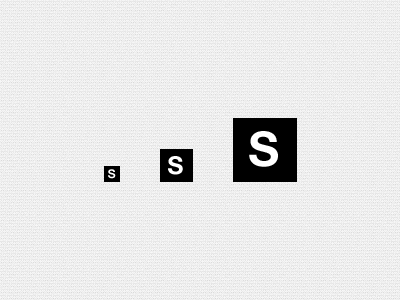
<style>
.page{position:relative;width:400px;height:300px}
.page>*{position:absolute;margin:0}
.t1{font:48px "HelveticaNeue-Bold";color:#ffffff}
.t2{font:24.8px "HelveticaNeue-Bold";color:#ffffff}
.t3{font:12px "HelveticaNeue-Bold";color:#ffffff}
</style>
<div class="page">
<p class="t1" style="left:249px;top:131px;width:29px;height:36px">S</p>
<p class="t2" style="left:168px;top:156px;width:15px;height:19px">S</p>
<p class="t3" style="left:108px;top:169px;width:8px;height:10px">S</p>
</div>
